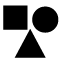
<style>
.page{position:relative;width:60px;height:60px;background:#ffffff}
.page>*{position:absolute;margin:0}
.t1{font:60px "OratorStd";color:#000000}
.t2{font:60px "Verdana";color:#000000}
</style>
<div class="page">
<p class="t1" style="left:3px;top:5px;width:25px;height:25px">■</p>
<p class="t2" style="left:32px;top:6px;width:27px;height:27px">●</p>
<p class="t1" style="left:14px;top:29px;width:32px;height:29px">▲</p>
</div>
